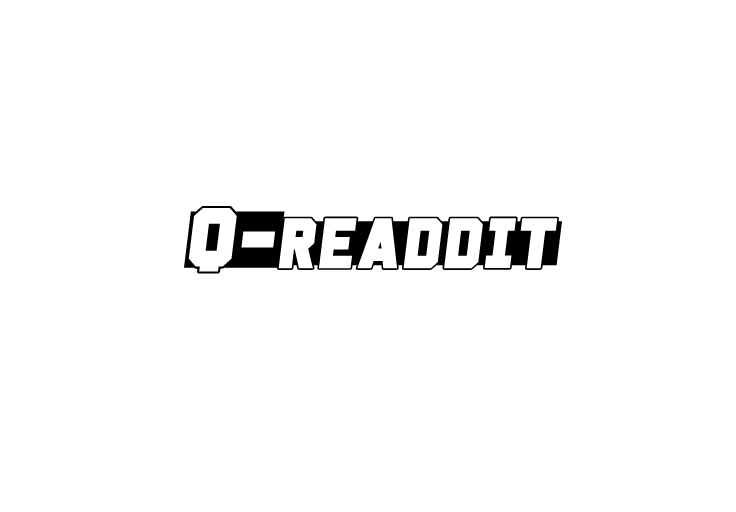
<style>
.page{position:relative;width:736px;height:512px;background:#ffffff}
.page>*{position:absolute;margin:0}
.t1{font:33.8px "FastForward";color:#000000}
.t2{font:43px "FastForward";color:#000000}
</style>
<div class="page">
<p class="t1" style="left:184px;top:206px;width:378px;height:68px"><span class="t2">   Q-</span>READDIT</p>
</div>
